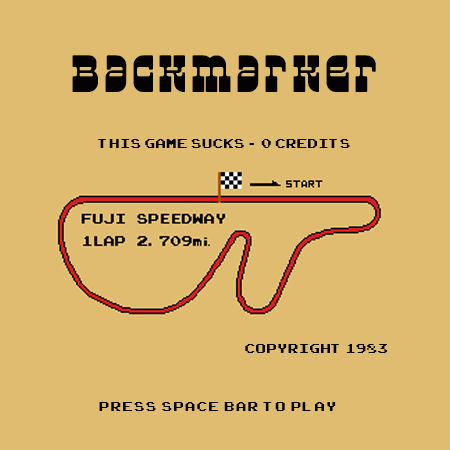
<style>
.page{position:relative;width:450px;height:450px;background:#e0bc70}
.page>*{position:absolute;margin:0}
.t1{font:48px "Superfly";letter-spacing:0.1em;color:#040301}
.t2{font:18px "ArcadeClassic";letter-spacing:0.05em;color:#040301}
.t3{font:18px "Helvetica";letter-spacing:0.05em;color:#040301}
.t4{font:18px "ArcadeClassic";letter-spacing:0.1em;color:#040301}
</style>
<div class="page">
<p class="t1" style="left:72px;top:55px;width:304px;height:37px">backmarker</p>
<p class="t2" style="left:98px;top:139px;width:252px;height:9px">this game sucks <span class="t3">- </span>0 credits</p>
<p class="t2" style="left:245px;top:344px;width:142px;height:9px">Copyright 1983</p>
<p class="t4" style="left:99px;top:402px;width:237px;height:9px">press space bar to play</p>
</div>
